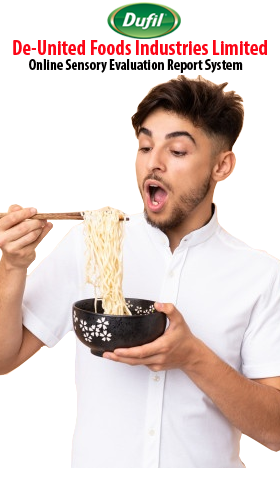
<style>
.page{position:relative;width:280px;height:500px;background:#ffffff}
.page>*{position:absolute;margin:0}
.t1{font:21px "MyriadPro-BoldCond";color:#fc0617}
.t2{font:15px "MyriadPro-BoldCond";color:#020000}
</style>
<div class="page">
<p class="t1" style="left:13px;top:40px;width:254px;height:15px">De-United Foods Industries Limited</p>
<p class="t2" style="left:29px;top:59px;width:214px;height:14px">Online Sensory Evaluation Report System</p>
</div>
